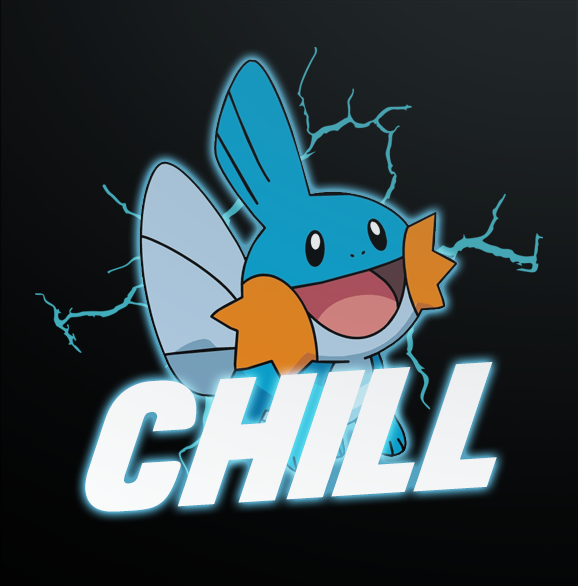
<style>
.page{position:relative;width:578px;height:586px}
.page>*{position:absolute;margin:0}
.t1{font:168.5px "Longhaul";color:#ffffff}
</style>
<div class="page">
<p class="t1" style="left:85px;top:362px;width:412px;height:150px;rotate:-4deg">CHILL</p>
</div>
